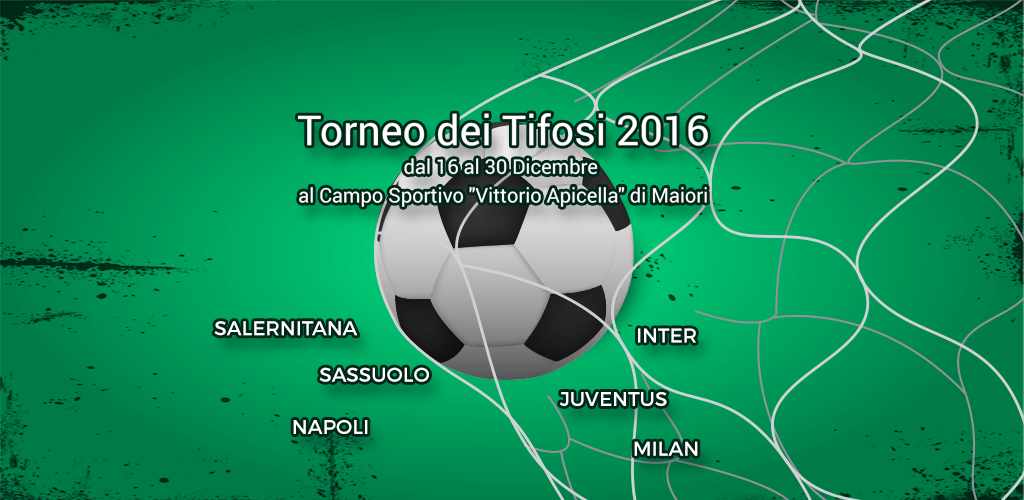
<style>
.page{position:relative;width:1024px;height:500px}
.page>*{position:absolute;margin:0}
.t1{font:20.1px/28.7px "Roboto-Regular";color:#ffffff}
.t2{font:41.2px/28.7px "Roboto-Regular";color:#ffffff}
.t3{font:20.1px "Montserrat-Regular";color:#ffffff}
</style>
<div class="page">
<p class="t1" style="left:298px;top:113px;width:410px;height:94px;text-align:center"><span class="t2">Torneo dei Tifosi 2016<br></span>dal 16 al 30 Dicembre <br>al Campo Sportivo "Vittorio Apicella" di Maiori</p>
<p class="t3" style="left:214px;top:321px;width:144px;height:15px">SALERNITANA</p>
<p class="t3" style="left:638px;top:328px;width:58px;height:15px">INTER</p>
<p class="t3" style="left:319px;top:367px;width:110px;height:15px">SASSUOLO</p>
<p class="t3" style="left:560px;top:392px;width:107px;height:14px">JUVENTUS</p>
<p class="t3" style="left:293px;top:420px;width:75px;height:14px">NAPOLI</p>
<p class="t3" style="left:634px;top:441px;width:64px;height:15px">MILAN</p>
</div>
